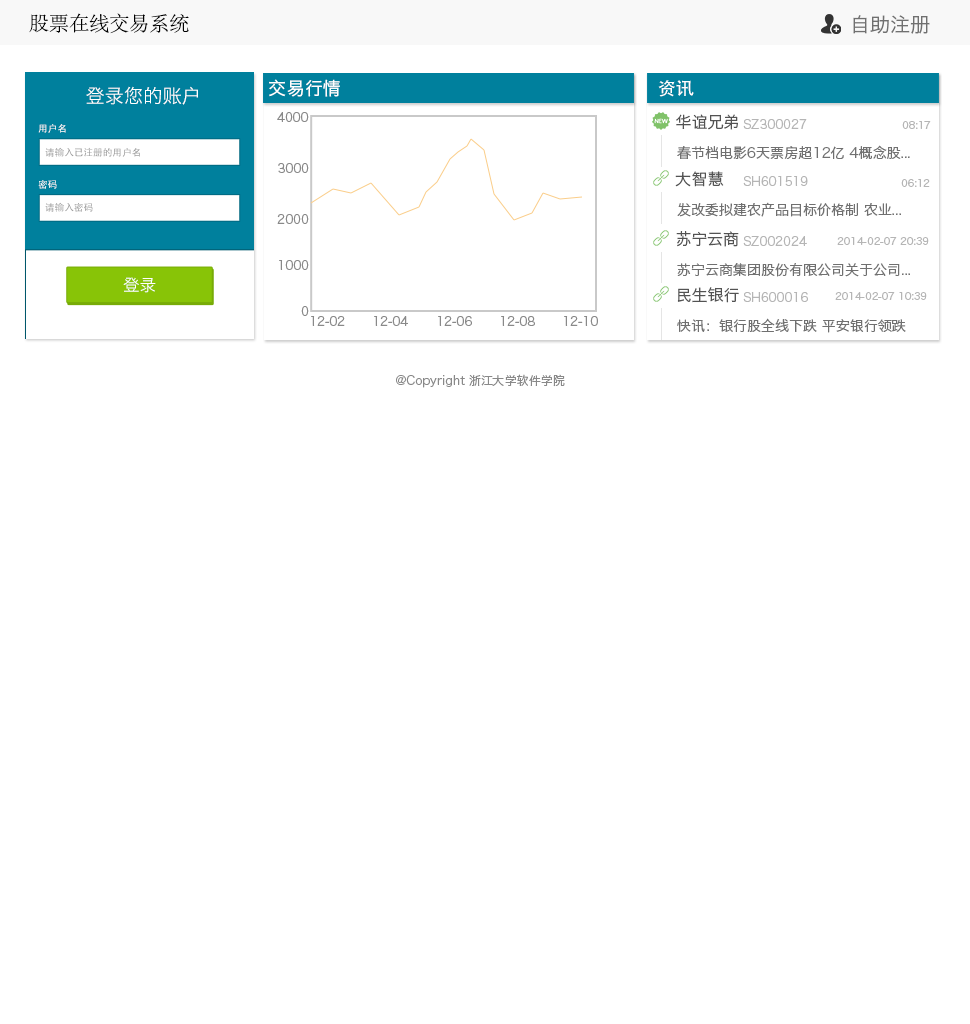
<style>
.page{position:relative;width:970px;height:1024px;background:#ffffff}
.page>*{position:absolute;margin:0}
.t1{font:20px "AdobeSongStd-Light";color:#000000}
.t2{font:20px "HiraginoSansGB-W3";color:#707070}
.t3{font:19.3px "HiraginoSansGB-W3";color:#ffffff}
.t4{font:18px "HiraginoSansGB-W3";color:#ffffff}
.t5{font:18px "AdobeHeitiStd-Regular";color:#ffffff}
.t6{font:12px "HiraginoSansGB-W3";color:#898989}
.t7{font:9.7px "AdobeHeitiStd-Regular";color:#ffffff}
.t8{font:16px "HiraginoSansGB-W3";color:#535353}
.t9{font:12px "HiraginoSansGB-W3";color:#b5b5b5}
.t10{font:10px "HiraginoSansGB-W3";color:#b5b5b5}
.t11{font:9.7px "AdobeHeitiStd-Regular";color:#999999}
.t12{font:14px "HiraginoSansGB-W3";color:#707070}
.t13{font:16.6px "HiraginoSansGB-W3";color:#ffffff}
</style>
<div class="page">
<p class="t1" style="left:29px;top:13px;width:160px;height:21px">股票在线交易系统</p>
<p class="t2" style="left:853px;top:15px;width:77px;height:19px">自助注册</p>
<p class="t3" style="left:86px;top:86px;width:112px;height:19px">登录您的账户</p>
<p class="t4" style="left:269px;top:79px;width:71px;height:18px">交易行情</p>
<p class="t5" style="left:658px;top:80px;width:36px;height:17px">资讯</p>
<p class="t6" style="left:277px;top:112px;width:32px;height:10px">4000</p>
<p class="t7" style="left:38px;top:124px;width:28px;height:9px">用户名</p>
<p class="t8" style="left:676px;top:114px;width:62px;height:16px">华谊兄弟</p>
<p class="t9" style="left:743px;top:119px;width:64px;height:10px">SZ300027</p>
<p class="t10" style="left:902px;top:121px;width:29px;height:8px">08:17</p>
<p class="t11" style="left:45px;top:147px;width:95px;height:10px">请输入已注册的用户名</p>
<p class="t12" style="left:677px;top:145px;width:233px;height:14px">春节档电影6天票房超12亿 4概念股...</p>
<p class="t6" style="left:278px;top:163px;width:31px;height:10px">3000</p>
<p class="t8" style="left:675px;top:171px;width:49px;height:16px">大智慧</p>
<p class="t7" style="left:38px;top:180px;width:19px;height:9px">密码</p>
<p class="t9" style="left:743px;top:176px;width:65px;height:10px">SH601519</p>
<p class="t10" style="left:901px;top:179px;width:29px;height:8px">06:12</p>
<p class="t11" style="left:45px;top:202px;width:48px;height:10px">请输入密码</p>
<p class="t12" style="left:677px;top:202px;width:224px;height:15px">发改委拟建农产品目标价格制 农业...</p>
<p class="t6" style="left:277px;top:214px;width:32px;height:10px">2000</p>
<p class="t8" style="left:676px;top:231px;width:63px;height:16px">苏宁云商</p>
<p class="t9" style="left:743px;top:236px;width:64px;height:10px">SZ002024</p>
<p class="t10" style="left:837px;top:237px;width:92px;height:8px">2014-02-07 20:39</p>
<p class="t6" style="left:279px;top:260px;width:30px;height:10px">1000</p>
<p class="t12" style="left:677px;top:263px;width:233px;height:14px">苏宁云商集团股份有限公司关于公司...</p>
<p class="t13" style="left:123px;top:277px;width:33px;height:16px">登录</p>
<p class="t8" style="left:677px;top:287px;width:62px;height:16px">民生银行</p>
<p class="t9" style="left:743px;top:292px;width:65px;height:10px">SH600016</p>
<p class="t10" style="left:835px;top:292px;width:92px;height:8px">2014-02-07 10:39</p>
<p class="t6" style="left:301px;top:306px;width:8px;height:10px">0</p>
<p class="t6" style="left:311px;top:316px;width:34px;height:10px">12-02</p>
<p class="t6" style="left:374px;top:316px;width:34px;height:10px">12-04</p>
<p class="t6" style="left:438px;top:316px;width:34px;height:10px">12-06</p>
<p class="t6" style="left:501px;top:316px;width:34px;height:10px">12-08</p>
<p class="t6" style="left:564px;top:316px;width:34px;height:10px">12-10</p>
<p class="t12" style="left:677px;top:318px;width:229px;height:15px">快讯：银行股全线下跌 平安银行领跌</p>
<p class="t6" style="left:396px;top:374px;width:169px;height:14px">@Copyright 浙江大学软件学院</p>
</div>
